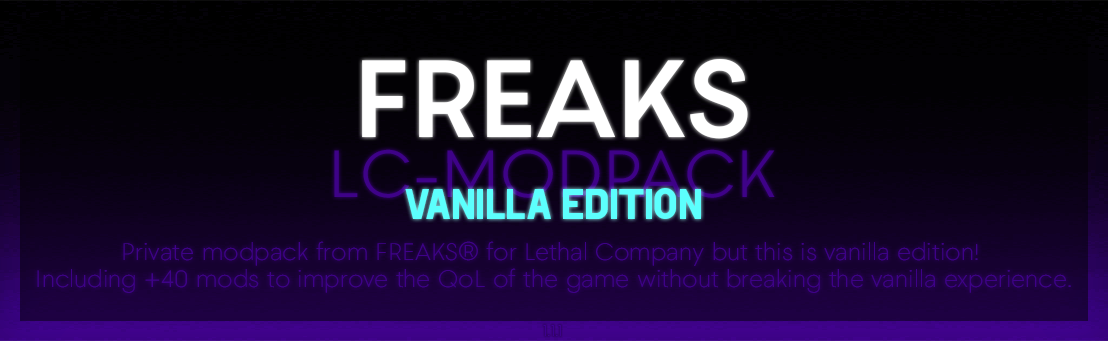
<style>
.page{position:relative;width:1108px;height:341px}
.page>*{position:absolute;margin:0}
.t1{font:112.5px "2030-Bold";color:#ffffff}
.t2{font:69.5px "2030-Light";color:#3e0288}
.t3{font:43.3px "HotelDeParisXe";color:#5cfffd}
.t4{font:25px/27px "2030-Thin";color:#3e028a}
.t5{font:16.6px "2030-Thin";color:#3e0288}
</style>
<div class="page">
<p class="t1" style="left:362px;top:59px;width:386px;height:80px">FREAKS</p>
<p class="t2" style="left:334px;top:149px;width:441px;height:49px">LC-MODPACK</p>
<p class="t3" style="left:405px;top:188px;width:296px;height:31px">Vanilla Edition</p>
<p class="t4" style="left:37px;top:241px;width:1034px;height:52px;text-align:center">Private modpack from FREAKS® for Lethal Company but this is vanilla edition! <br>Including +40 mods to improve the QoL of the game without breaking the vanilla experience.</p>
<p class="t5" style="left:543px;top:324px;width:18px;height:13px">1.1.1</p>
</div>
